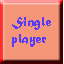
<style>
.page{position:relative;width:64px;height:64px;background:#f69679}
.page>*{position:absolute;margin:0}
.t1{font:14px "MaturaMTScriptCapitals";color:#573cf8}
</style>
<div class="page">
<p class="t1" style="left:12px;top:17px;width:39px;height:30px;text-align:right">Single<br>player</p>
</div>
